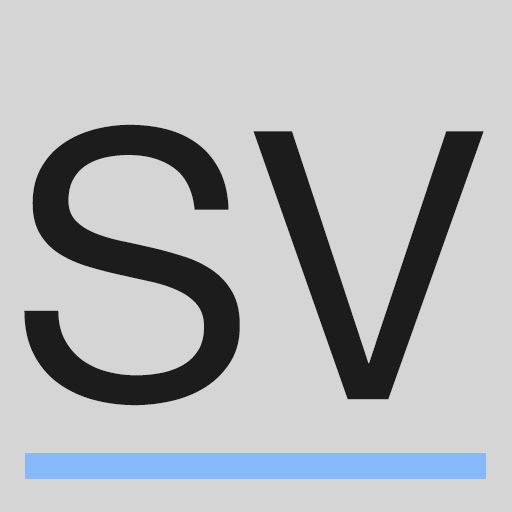
<style>
.page{position:relative;width:512px;height:512px;background:#d5d5d5}
.page>*{position:absolute;margin:0}
.t1{font:375px "HelveticaNeue";color:#1c1c1c}
</style>
<div class="page">
<p class="t1" style="left:24px;top:124px;width:460px;height:282px">SV</p>
</div>
